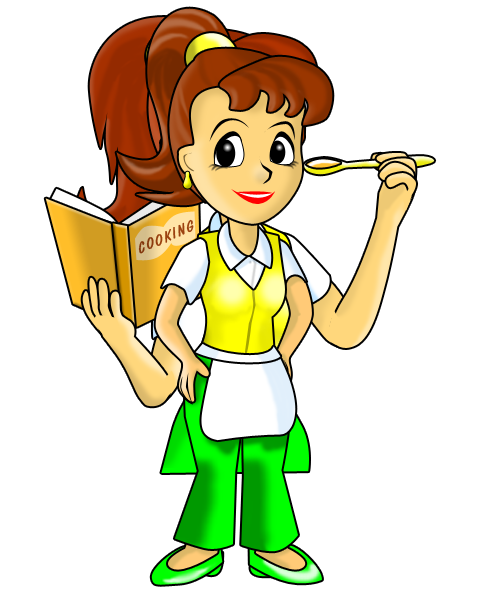
<style>
.page{position:relative;width:500px;height:600px;background:#ffffff}
.page>*{position:absolute;margin:0}
.t1{font:15.3px "DomCasualBT-Regular";letter-spacing:0.095em;color:#9c410f;font-style:italic;scale:1.05 1}
</style>
<div class="page">
<p class="t1" style="left:138px;top:219px;width:56px;height:35px;rotate:-23deg">COOKING</p>
</div>
